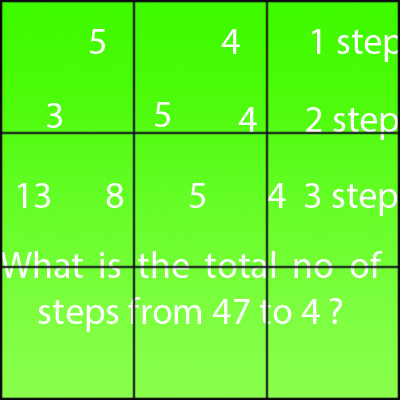
<style>
.page{position:relative;width:400px;height:400px}
.page>*{position:absolute;margin:0}
.t1{font:38px "MyriadPro-Regular";color:#ffffff}
</style>
<div class="page">
<p class="t1" style="left:89px;top:29px;width:16px;height:25px">5</p>
<p class="t1" style="left:221px;top:29px;width:19px;height:25px">4</p>
<p class="t1" style="left:154px;top:102px;width:16px;height:25px">5</p>
<p class="t1" style="left:46px;top:103px;width:16px;height:25px">3</p>
<p class="t1" style="left:238px;top:107px;width:19px;height:25px">4</p>
<p class="t1" style="left:306px;top:107px;width:93px;height:33px">2 step</p>
<p class="t1" style="left:18px;top:183px;width:32px;height:25px">13</p>
<p class="t1" style="left:106px;top:183px;width:17px;height:25px">8</p>
<p class="t1" style="left:189px;top:183px;width:16px;height:25px">5</p>
<p class="t1" style="left:267px;top:183px;width:19px;height:25px">4</p>
<p class="t1" style="left:304px;top:183px;width:94px;height:33px">3 step</p>
<p class="t1" style="left:0px;top:251px;width:383px;height:81px;text-align:justify">What is the total no of steps from 47 to 4 ?</p>
</div>
